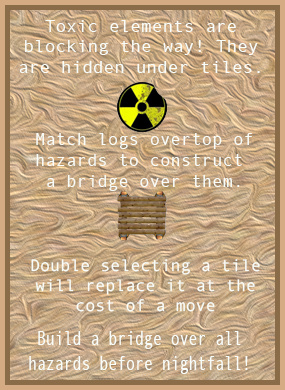
<style>
.page{position:relative;width:285px;height:390px}
.page>*{position:absolute;margin:0}
.t1{font:17.3px "AndaleMono";color:#f9fdf9}
.t2{font:17.6px "AndaleMono";color:#f9fdf9}
.t3{font:16.7px "AndaleMono";color:#f9fdf9}
.t4{font:20.3px "AndaleMono";color:#f9fdf9;scale:0.73 1}
</style>
<div class="page">
<p class="t1" style="left:19px;top:20px;width:241px;height:53px;text-align:center">Toxic elements are<br>blocking the way! They<br>are hidden under tiles.</p>
<p class="t2" style="left:36px;top:133px;width:216px;height:58px;text-align:center">Match logs overtop of<br>hazards to construct <br>a bridge over them.</p>
<p class="t3" style="left:31px;top:259px;width:229px;height:53px;text-align:center">Double selecting a tile<br>will replace it at the<br>cost of a move</p>
<p class="t4" style="left:29px;top:331px;width:219px;height:43px;text-align:center">Build a bridge over all<br>hazards before nightfall!</p>
</div>
